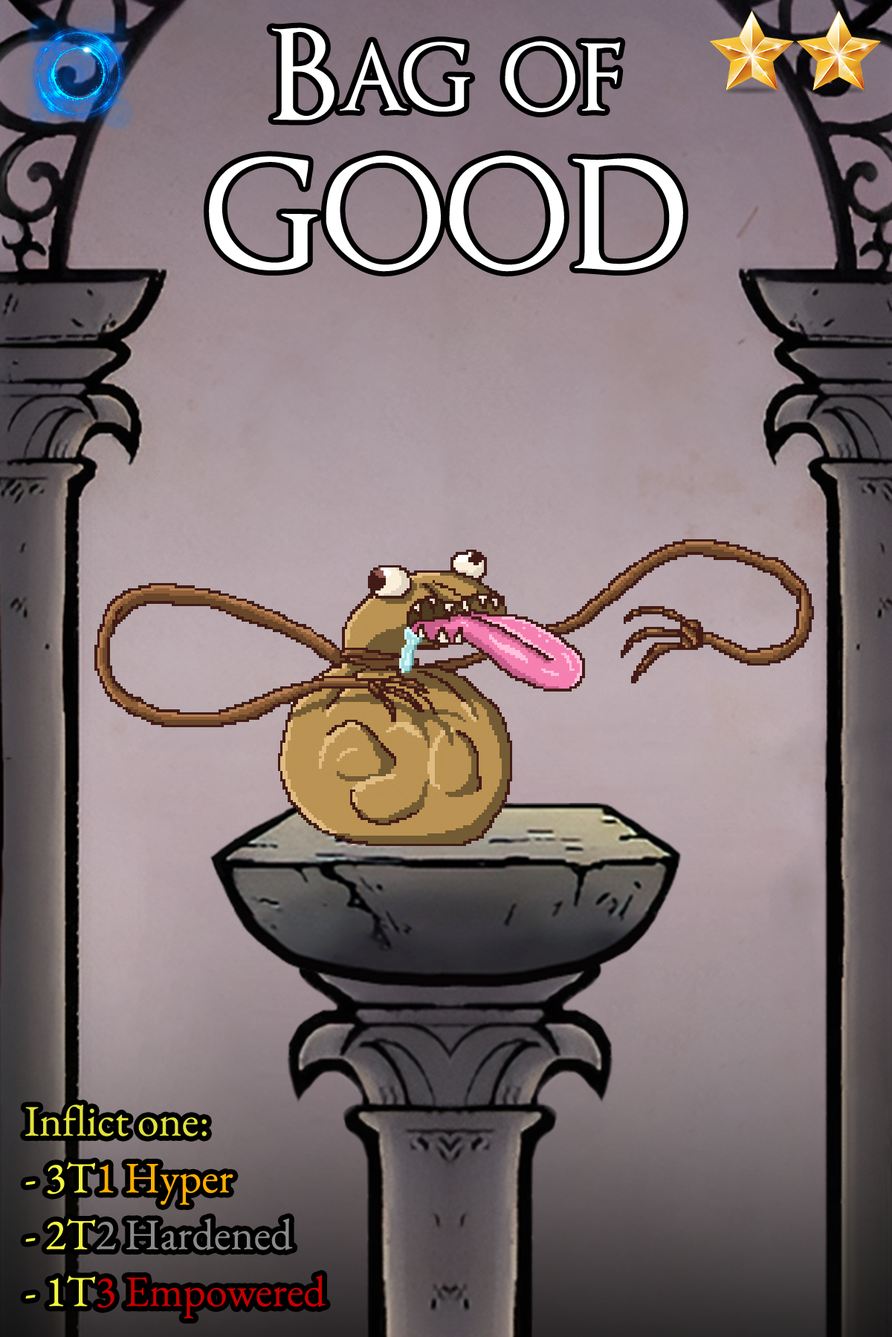
<style>
.page{position:relative;width:892px;height:1337px}
.page>*{position:absolute;margin:0}
.t1{font:210.3px/119.6px "OptimusPrinceps";color:#ffffff}
.t2{font:343.3px/119.6px "OptimusPrinceps";color:#ffffff}
.t3{font:74.6px/56.8px "EBGaramond-Regular";color:#e0e23a}
.t4{font:74.6px/56.8px "EBGaramond-Regular";color:#f3f53f}
.t5{font:74.6px/56.8px "EBGaramond-Regular";color:#ffae00}
.t6{font:74.6px/56.8px "EBGaramond-Regular";color:#8a8a8a}
.t7{font:74.6px/56.8px "EBGaramond-Regular";color:#c50000}
</style>
<div class="page">
<p class="t1" style="left:209px;top:27px;width:474px;height:245px;text-align:center">Bag of<br><span class="t2">good</span></p>
<p class="t3" style="left:25px;top:1105px;width:300px;height:214px">Inflict one:<br><span class="t4">- 3T</span><span class="t5">1 Hyper<br></span><span class="t4">- 2T</span><span class="t6">2 Hardened<br></span><span class="t4">- 1T</span><span class="t7">3 Empowered</span></p>
</div>
